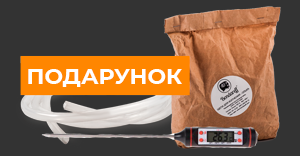
<style>
.page{position:relative;width:300px;height:156px;background:#333333}
.page>*{position:absolute;margin:0}
.t1{font:22px "Montserrat-Bold";color:#ffffff}
</style>
<div class="page">
<p class="t1" style="left:28px;top:69px;width:154px;height:18px">ПОДАРУНОК</p>
</div>
